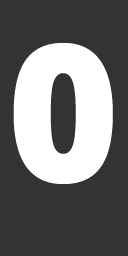
<style>
.page{position:relative;width:128px;height:256px;background:#333333}
.page>*{position:absolute;margin:0}
.t1{font:192.4px "OpenSans-Extrabold";color:#ffffff}
</style>
<div class="page">
<p class="t1" style="left:13px;top:42px;width:100px;height:142px">0</p>
</div>
